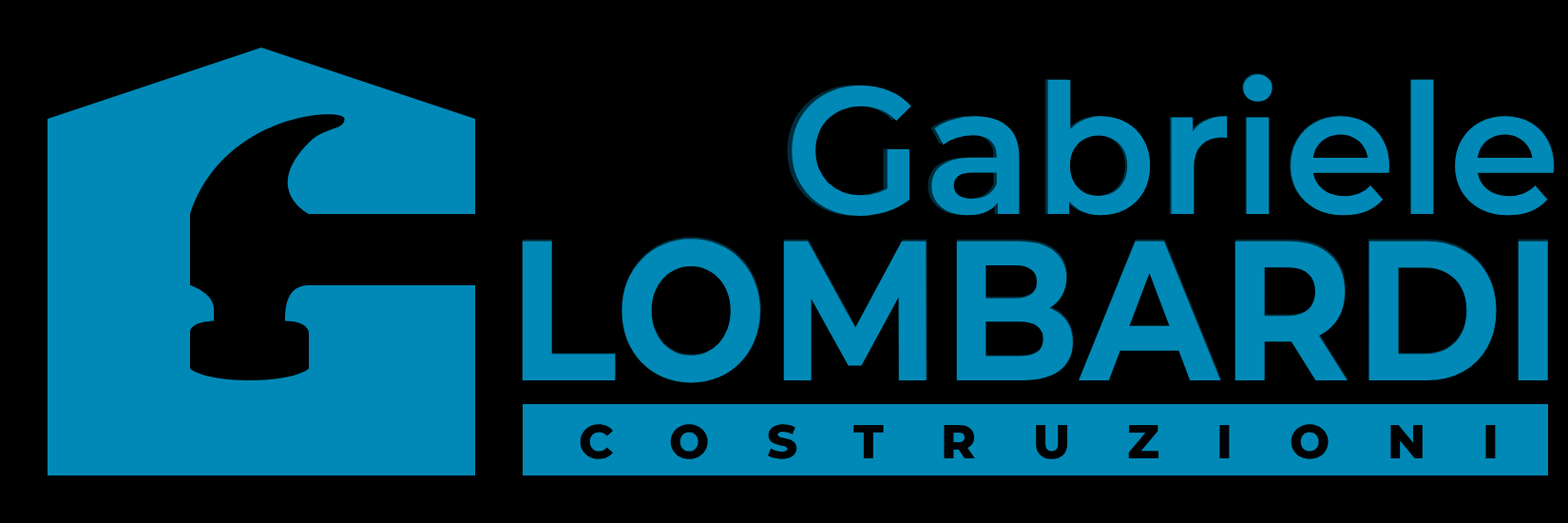
<style>
.page{position:relative;width:1568px;height:523px;background:#000000}
.page>*{position:absolute;margin:0}
.t1{font:180.6px "Montserrat-SemiBold";color:#0089b6}
.t2{font:198.6px "Montserrat-Bold";letter-spacing:0.005em;color:#0089b6;scale:0.91 1}
</style>
<div class="page">
<p class="t1" style="left:792px;top:74px;width:762px;height:142px">Gabriele</p>
<p class="t2" style="left:522px;top:239px;width:1026px;height:144px">LOMBARDI</p>
</div>
